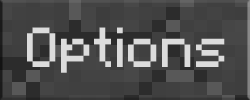
<style>
.page{position:relative;width:250px;height:100px}
.page>*{position:absolute;margin:0}
.t1{font:45px "Minecraftia";color:#dcdcdc}
</style>
<div class="page">
<p class="t1" style="left:27px;top:27px;width:198px;height:46px">Options</p>
</div>
